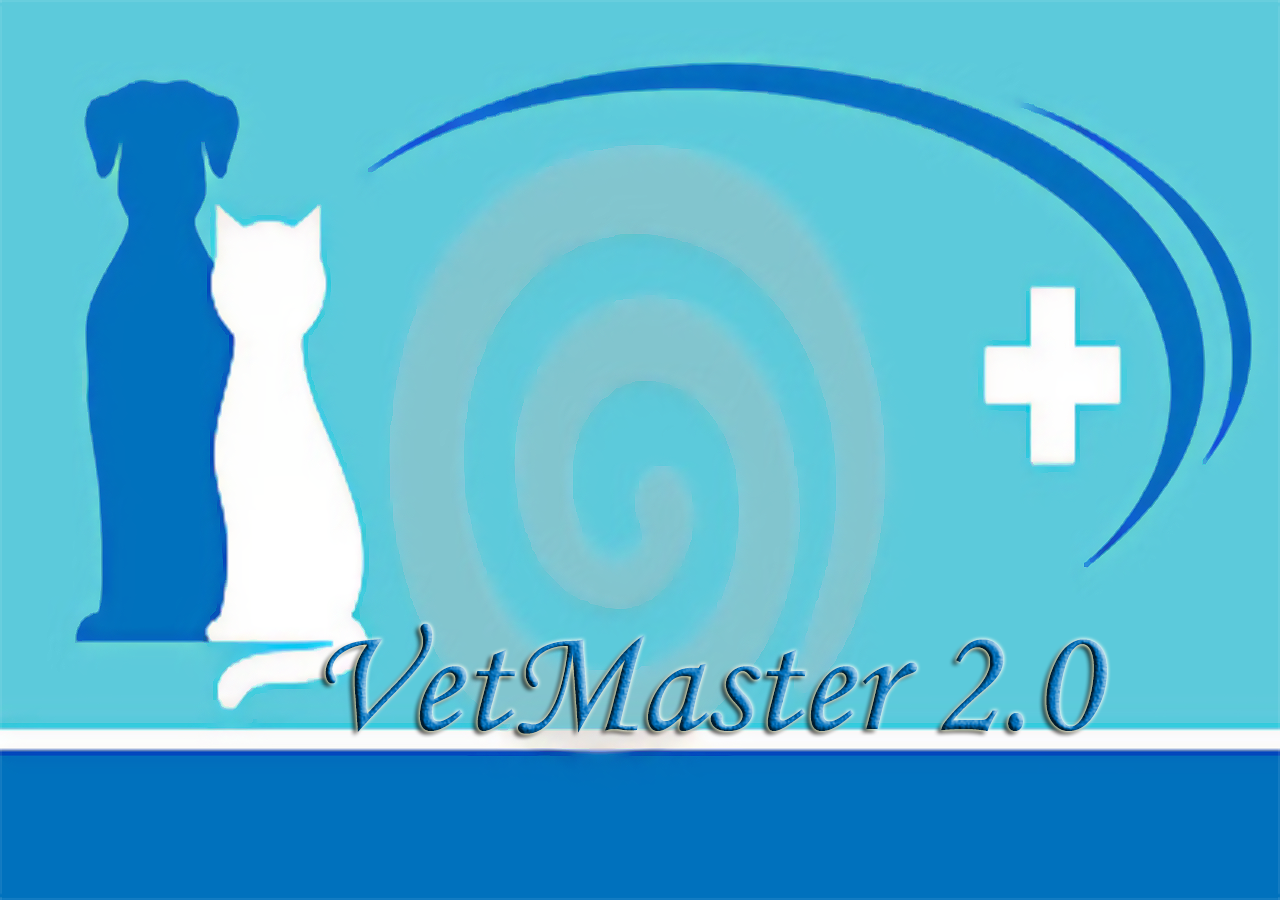
<style>
.page{position:relative;width:1280px;height:900px;background:#5ccadb}
.page>*{position:absolute;margin:0}
.t1{font:152.8px "MonotypeCorsiva"}
</style>
<div class="page">
<p class="t1" style="left:325px;top:623px;width:782px;height:111px">VetMaster 2.0</p>
</div>
